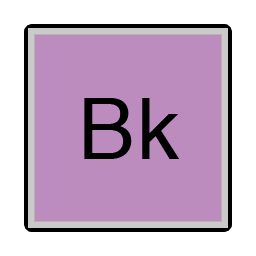
<style>
.page{position:relative;width:256px;height:256px;background:#bd8cbf}
.page>*{position:absolute;margin:0}
.t1{font:85px "Helvetica";letter-spacing:0.025em;color:#000000}
</style>
<div class="page">
<p class="t1" style="left:84px;top:98px;width:95px;height:61px">Bk</p>
</div>
